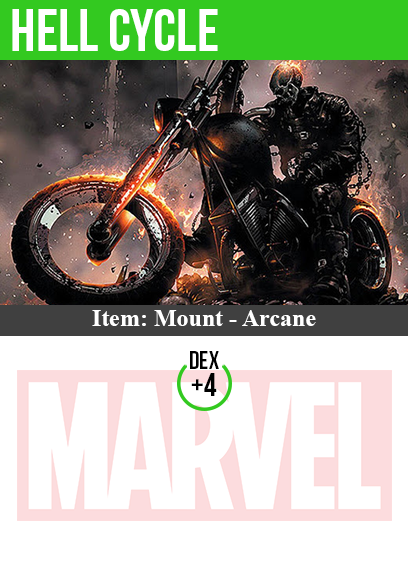
<style>
.page{position:relative;width:408px;height:585px;background:#ffffff}
.page>*{position:absolute;margin:0}
.t1{font:60px "BebasNeue";color:#ffffff}
.t2{font:24px "TimesNewRomanPS-BoldMT";color:#ffffff}
.t3{font:25px "BebasNeue";color:#000000}
.t4{font:32px "BebasNeue";color:#000000}
</style>
<div class="page">
<p class="t1" style="left:12px;top:9px;width:206px;height:42px">hell cycle</p>
<p class="t2" style="left:92px;top:310px;width:224px;height:16px">Item: Mount - Arcane</p>
<p class="t3" style="left:190px;top:351px;width:29px;height:18px">dex</p>
<p class="t4" style="left:191px;top:373px;width:26px;height:23px">+4</p>
</div>
